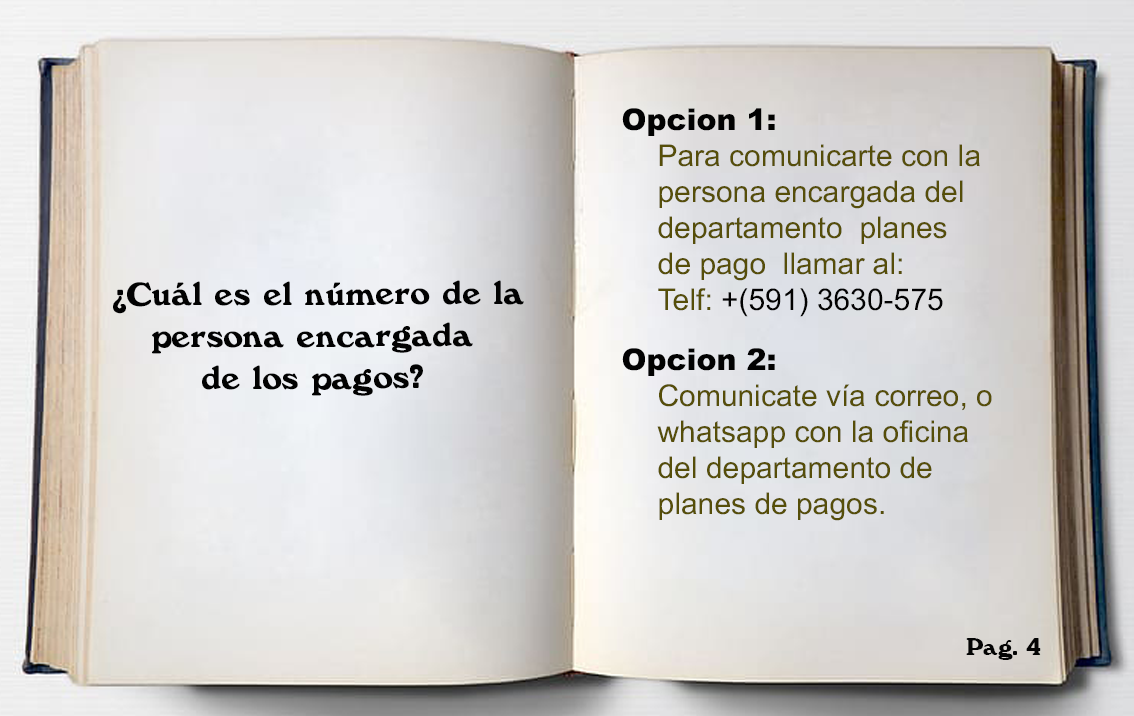
<style>
.page{position:relative;width:1134px;height:716px}
.page>*{position:absolute;margin:0}
.t1{font:30px "ArialMT";color:#564e09}
.t2{font:30px "Arial-Black";color:#020202}
.t3{font:30px "ArialMT";color:#020202}
.t4{font:35px "Windsor-Regular";color:#020202}
.t5{font:25px "Windsor-Regular";color:#040404}
</style>
<div class="page">
<p class="t1" style="left:622px;top:108px;width:358px;height:209px"><span class="t2">Opcion 1: <br>  </span>Para comunicarte con la<br> persona encargada del <br> departamento  planes <br> de pago  llamar al:<br> Telf: <span class="t3">+(591) 3630-575</span></p>
<p class="t4" style="left:113px;top:280px;width:411px;height:116px;text-align:center">¿Cuál es el número de la <br>persona encargada <br>de los pagos?</p>
<p class="t1" style="left:622px;top:348px;width:370px;height:173px"><span class="t2">Opcion 2: <br>  </span>Comunicate vía correo, o <br> whatsapp con la oficina <br> del departamento de<br> planes de pagos.</p>
<p class="t5" style="left:966px;top:638px;width:75px;height:22px">Pag. 4</p>
</div>
